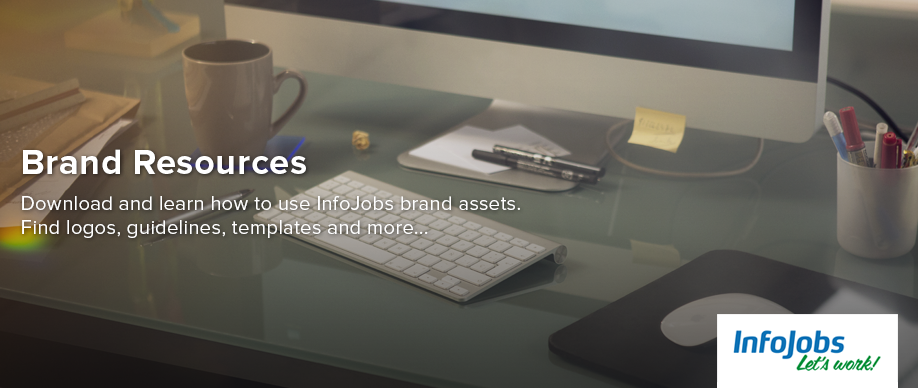
<style>
.page{position:relative;width:918px;height:388px}
.page>*{position:absolute;margin:0}
.t1{font:20px/18px "ProximaNova-Regular";letter-spacing:0.02em;color:#ffffff}
.t2{font:36px/48px "ProximaNova-Bold";letter-spacing:0.02em;color:#ffffff}
.t3{font:20px/36px "ProximaNova-Regular";letter-spacing:0.02em;color:#ffffff}
.t4{font:20px/24px "ProximaNova-Regular";letter-spacing:0.02em;color:#ffffff}
</style>
<div class="page">
<p class="t1" style="left:22px;top:149px;width:498px;height:89px"><span class="t2">Brand Resources<br></span><span class="t3">Download </span><span class="t4">and learn how to use </span><span class="t3">InfoJobs brand assets. <br></span>Find logos, guidelines, templates and more...</p>
</div>
